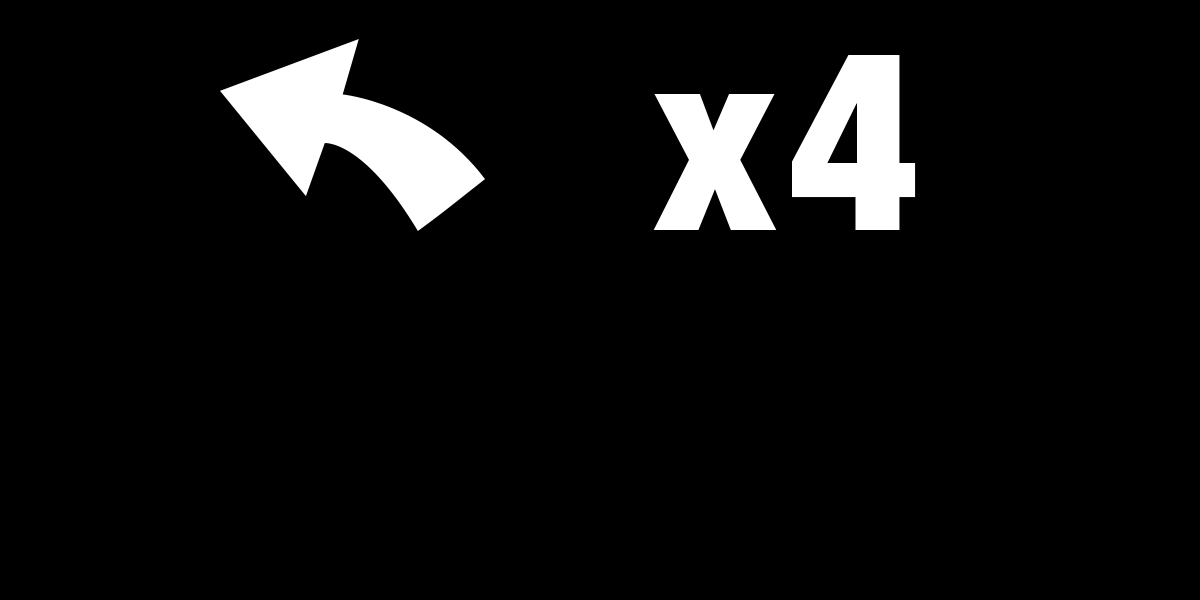
<style>
.page{position:relative;width:1200px;height:600px;background:#000000}
.page>*{position:absolute;margin:0}
.t1{font:252.3px "HelveticaNeue-CondensedBlack";letter-spacing:0.05em;color:#ffffff}
</style>
<div class="page">
<p class="t1" style="left:653px;top:55px;width:263px;height:175px">x4</p>
</div>
